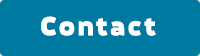
<style>
.page{position:relative;width:200px;height:56px;background:#0079a0}
.page>*{position:absolute;margin:0}
.t1{font:26.6px "MovaviGrotesqueBlack";letter-spacing:0.08em;color:#ffffff}
</style>
<div class="page">
<p class="t1" style="left:41px;top:16px;width:115px;height:20px">Contact</p>
</div>
